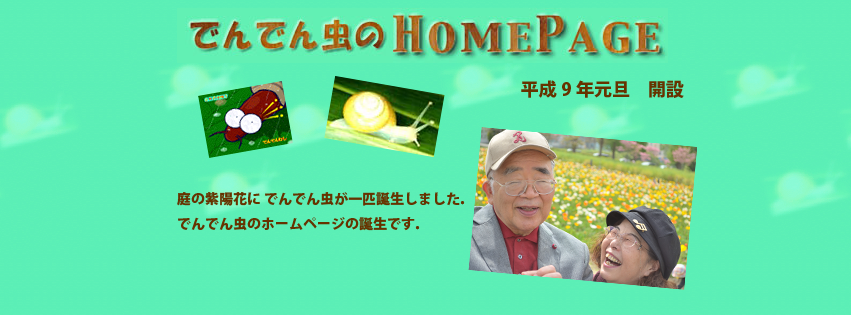
<style>
.page{position:relative;width:851px;height:315px}
.page>*{position:absolute;margin:0}
.t1{font:18px "KozGoPro-Heavy";color:#663300}
.t2{font:14px "KozGoPro-Heavy";color:#663300}
</style>
<div class="page">
<p class="t1" style="left:521px;top:80px;width:163px;height:18px">平成9年元旦　開設</p>
<p class="t2" style="left:177px;top:192px;width:288px;height:39px">庭の紫陽花に でんでん虫が一匹誕生しました．<br>でんでん虫のホームページの誕生です．</p>
</div>
